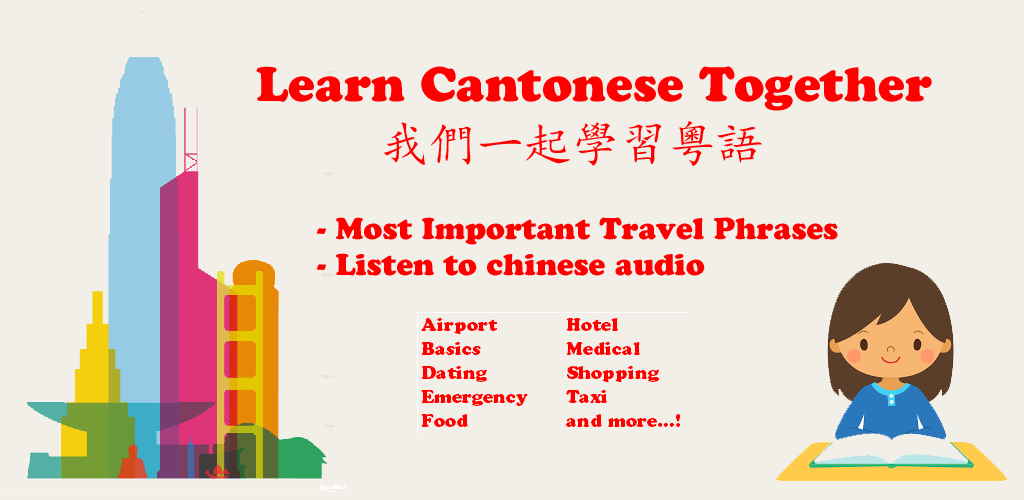
<style>
.page{position:relative;width:1024px;height:500px;background:#f2eee8}
.page>*{position:absolute;margin:0}
.t1{font:48px "CooperBlackStd";color:#ff0000}
.t2{font:48px "KaiTi";color:#ff0000}
.t3{font:30px "CooperBlackStd";color:#ff0000}
</style>
<div class="page">
<p class="t1" style="left:256px;top:66px;width:676px;height:45px">Learn Cantonese Together</p>
<p class="t2" style="left:384px;top:121px;width:378px;height:45px">我們一起學習粵語</p>
<p class="t3" style="left:317px;top:217px;width:521px;height:59px">- Most Important Travel Phrases<br>- Listen to chinese audio</p>
</div>
